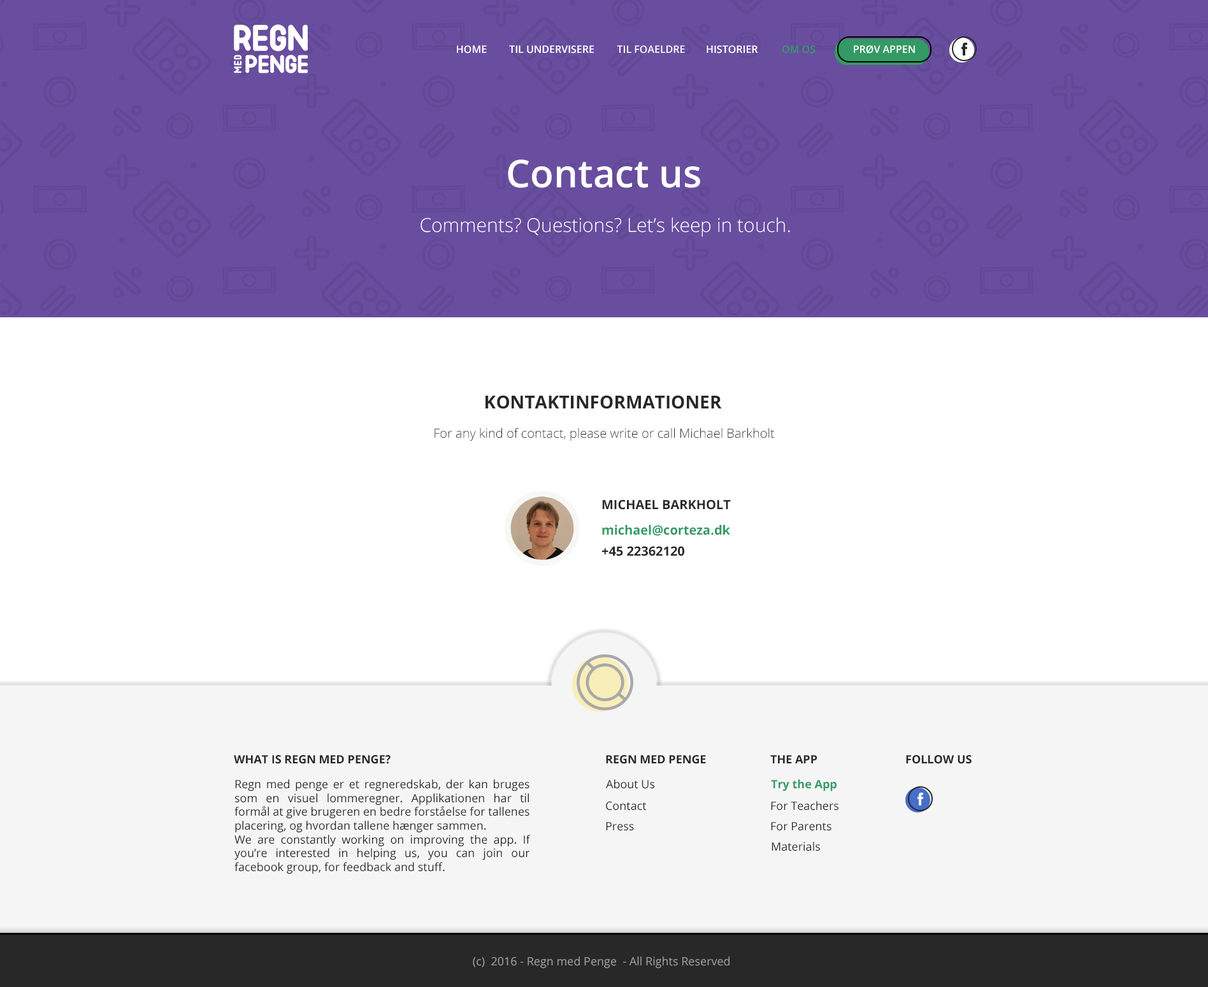
<style>
.page{position:relative;width:1208px;height:987px;background:#ffffff}
.page>*{position:absolute;margin:0}
.t1{font:10.2px "OpenSans-Semibold";color:#ffffff}
.t2{font:10.2px "OpenSans-Semibold";color:#f7f7f5}
.t3{font:10.2px "OpenSans-Semibold";color:#339a65}
.t4{font:38.2px "OpenSans-Semibold";color:#ffffff}
.t5{font:19.1px "OpenSans-Light";color:#ffffff}
.t6{font:17.8px "OpenSans-Bold";color:#282828;text-transform:uppercase}
.t7{font:12.7px "OpenSans-Light";color:#282828}
.t8{font:12.7px "OpenSans-Bold";color:#282828}
.t9{font:12.7px "OpenSans-Bold";color:#339a65}
.t10{font:11.5px "OpenSans-Bold";color:#282828}
.t11{font:11.5px "OpenSans";color:#282828}
.t12{font:11.5px "OpenSans-Bold";color:#339a65}
.t13{font:11.5px "OpenSans";color:#9e9e9e}
</style>
<div class="page">
<p class="t1" style="left:457px;top:45px;width:30px;height:9px">HOME</p>
<p class="t1" style="left:509px;top:45px;width:85px;height:9px">TIL UNDERVISERE</p>
<p class="t2" style="left:617px;top:45px;width:68px;height:9px">TIL FOAELDRE</p>
<p class="t1" style="left:707px;top:45px;width:51px;height:9px">HISTORIER</p>
<p class="t3" style="left:782px;top:45px;width:34px;height:9px">OM OS</p>
<p class="t1" style="left:854px;top:45px;width:61px;height:9px">PRØV APPEN</p>
<p class="t4" style="left:508px;top:159px;width:192px;height:29px">Contact us</p>
<p class="t5" style="left:421px;top:217px;width:369px;height:20px">Comments? Questions? Let’s keep in touch.</p>
<p class="t6" style="left:486px;top:395px;width:236px;height:14px">Kontaktinformationer</p>
<p class="t7" style="left:435px;top:428px;width:340px;height:13px">For any kind of contact, please write or call Michael Barkholt</p>
<p class="t8" style="left:602px;top:500px;width:129px;height:10px">MICHAEL BARKHOLT</p>
<p class="t9" style="left:602px;top:524px;width:128px;height:12px">michael@corteza.dk</p>
<p class="t8" style="left:602px;top:546px;width:82px;height:10px">+45 22362120</p>
<p class="t10" style="left:234px;top:755px;width:157px;height:9px">WHAT IS REGN MED PENGE?</p>
<p class="t10" style="left:606px;top:755px;width:100px;height:9px">REGN MED PENGE</p>
<p class="t10" style="left:770px;top:755px;width:48px;height:8px">THE APP</p>
<p class="t10" style="left:906px;top:755px;width:66px;height:9px">FOLLOW US</p>
<p class="t11" style="left:234px;top:779px;width:297px;height:95px;text-align:justify">Regn med penge er et regneredskab, der kan bruges som en visuel lommeregner. Applikationen har til formål at give brugeren en bedre forståelse for tallenes placering, og hvordan tallene hænger sammen.<br>We are constantly working on improving the app. If you’re interested in helping us, you can join our facebook group, for feedback and stuff.</p>
<p class="t11" style="left:606px;top:779px;width:49px;height:10px">About Us</p>
<p class="t12" style="left:771px;top:779px;width:66px;height:12px">Try the App</p>
<p class="t11" style="left:606px;top:802px;width:41px;height:9px">Contact</p>
<p class="t11" style="left:771px;top:801px;width:68px;height:10px">For Teachers</p>
<p class="t11" style="left:606px;top:822px;width:28px;height:9px">Press</p>
<p class="t11" style="left:771px;top:822px;width:61px;height:9px">For Parents</p>
<p class="t11" style="left:772px;top:842px;width:48px;height:9px">Materials</p>
<p class="t13" style="left:473px;top:956px;width:257px;height:13px">(c)  2016 - Regn med Penge  - All Rights Reserved</p>
</div>
